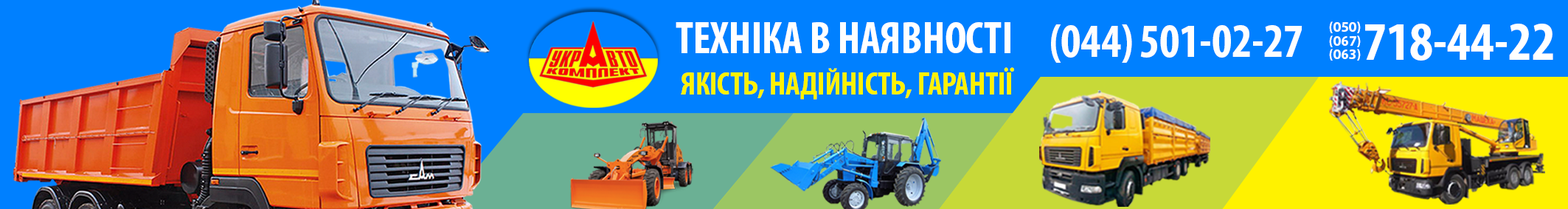
<style>
.page{position:relative;width:1568px;height:209px;background:#0080ff}
.page>*{position:absolute;margin:0}
.t1{font:45px "MyriadPro-BoldCond";letter-spacing:-0.01em;color:#ffffff}
.t2{font:47.2px "MyriadPro-BoldCond";letter-spacing:-0.01em;color:#fefefe}
.t3{font:14.2px "MyriadPro-Bold";color:#fdfcfc}
.t4{font:14.2px "MyriadPro-Bold";color:#ffffff}
.t5{font:55px "MyriadPro-BoldCond";letter-spacing:-0.01em;color:#ffffff}
.t6{font:32px "MyriadPro-BoldCond";letter-spacing:-0.01em;color:#fff200}
</style>
<div class="page">
<p class="t1" style="left:676px;top:22px;width:334px;height:31px">ТЕХНІКА В НАЯВНОСТІ</p>
<p class="t2" style="left:1051px;top:24px;width:251px;height:39px">(044) 501-02-27</p>
<p class="t3" style="left:1329px;top:21px;width:32px;height:12px">(050<span class="t4">)</span></p>
<p class="t5" style="left:1365px;top:24px;width:188px;height:36px">718-44-22</p>
<p class="t4" style="left:1329px;top:35px;width:32px;height:12px">(067)</p>
<p class="t4" style="left:1329px;top:49px;width:32px;height:11px">(063)</p>
<p class="t6" style="left:681px;top:67px;width:333px;height:33px">ЯКІСТЬ, НАДІЙНІСТЬ, ГАРАНТІЇ</p>
</div>
